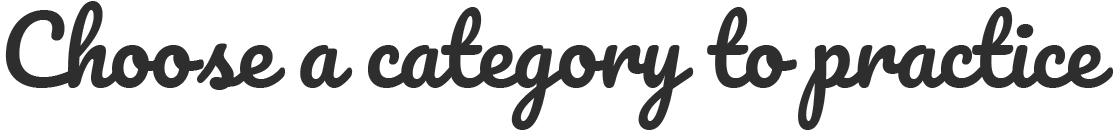
<style>
.page{position:relative;width:1118px;height:134px;background:#ffffff}
.page>*{position:absolute;margin:0}
.t1{font:91.7px "Pacifico-Regular";color:#2e2e2e}
</style>
<div class="page">
<p class="t1" style="left:5px;top:1px;width:1108px;height:129px">Choose a category to practice</p>
</div>
